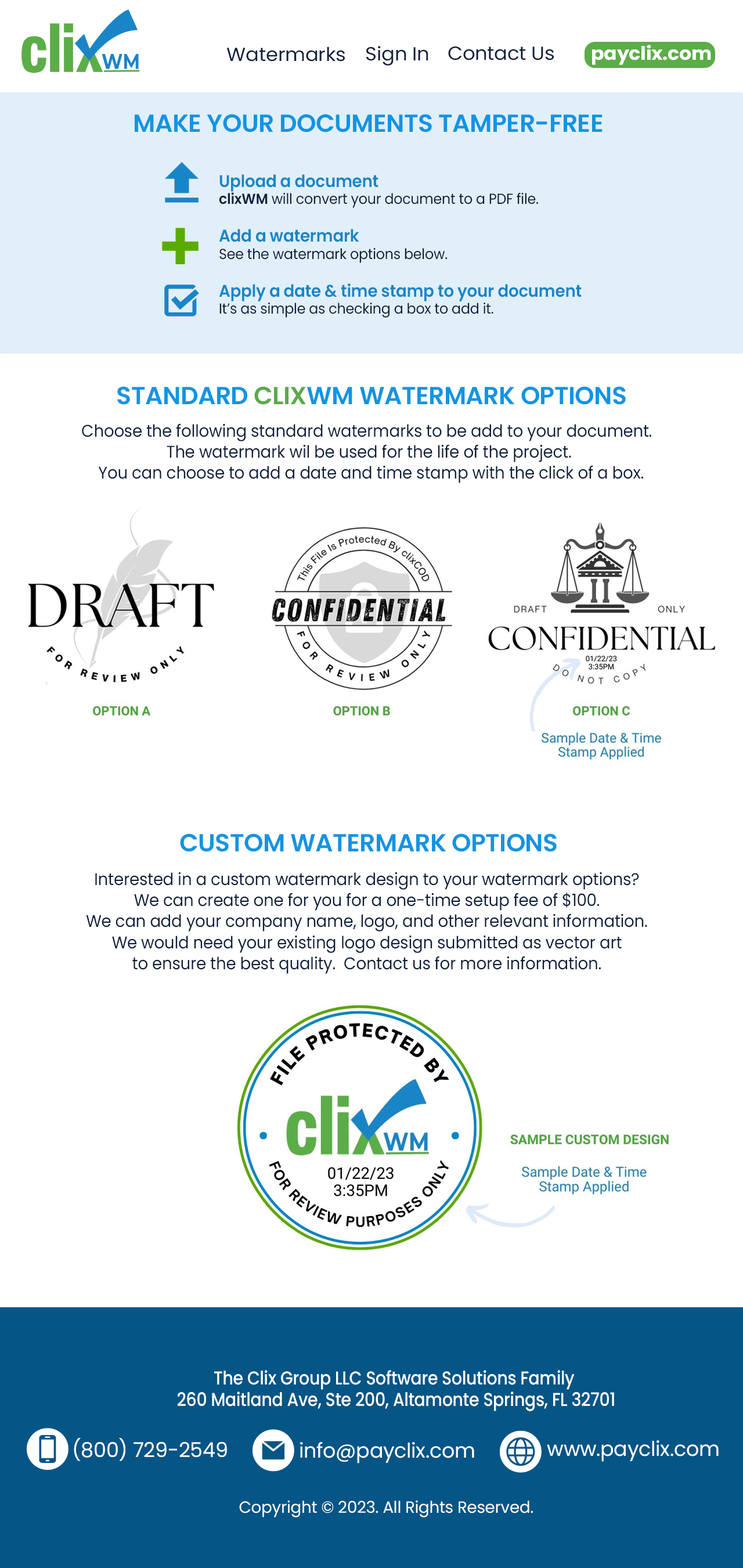
<style>
.page{position:relative;width:743px;height:1568px;background:#ffffff}
.page>*{position:absolute;margin:0}
.t1{font:19px "Poppins-Regular";letter-spacing:-0.01em;color:#10203c;scale:1.04 1}
.t2{font:18.6px "Poppins-Bold";letter-spacing:-0.01em;color:#ffffff;scale:1.04 1}
.t3{font:24.8px "Poppins-SemiBold";letter-spacing:-0.014em;color:#1394e3;text-transform:uppercase}
.t4{font:14.5px/16.9px "Poppins-Regular";letter-spacing:-0.01em;color:#10203c;scale:0.95 1}
.t5{font:16.9px/21.1px "Poppins-SemiBold";letter-spacing:-0.01em;color:#1686c8;scale:0.95 1}
.t6{font:14.5px/16.9px "Poppins-SemiBold";letter-spacing:-0.01em;color:#10203c;scale:0.95 1}
.t7{font:24.8px "Poppins-SemiBold";letter-spacing:-0.014em;color:#5baa4a;text-transform:uppercase}
.t8{font:16.9px/21.1px "Poppins-Regular";letter-spacing:-0.01em;color:#10203c;scale:0.95 1}
.t9{font:18.6px/21.8px "Poppins-Medium";letter-spacing:-0.01em;color:#ffffff;scale:0.89 1}
.t10{font:20.5px "Poppins-Regular";letter-spacing:-0.01em;color:#ffffff}
.t11{font:16.3px "Poppins-Regular";letter-spacing:-0.01em;color:#ffffff}
</style>
<div class="page">
<p class="t1" style="left:226px;top:46px;width:119px;height:16px">Watermarks</p>
<p class="t1" style="left:366px;top:46px;width:63px;height:20px">Sign In</p>
<p class="t1" style="left:448px;top:46px;width:106px;height:14px">Contact Us</p>
<p class="t2" style="left:592px;top:45px;width:119px;height:20px">payclix.com</p>
<p class="t3" style="left:135px;top:114px;width:468px;height:18px">Make Your Documents Tamper-Free</p>
<p class="t4" style="left:219px;top:174px;width:363px;height:144px"><span class="t5">Upload a document<br></span><span class="t6">clixWM</span> will convert your document to a PDF file.<br><br><span class="t5">Add a watermark<br></span>See the watermark options below.<br><br><span class="t5">Apply a date &amp; time stamp to your document<br></span>It’s as simple as checking a box to add it.</p>
<p class="t3" style="left:117px;top:386px;width:509px;height:19px">standard <span class="t7">clix</span>wm Watermark Options</p>
<p class="t8" style="left:82px;top:423px;width:570px;height:60px;text-align:center">Choose the following standard watermarks to be add to your document. <br>The watermark wil be used for the life of the project.<br> You can choose to add a date and time stamp with the click of a box.</p>
<p class="t3" style="left:180px;top:833px;width:377px;height:19px">custom Watermark Options</p>
<p class="t8" style="left:86px;top:872px;width:562px;height:102px;text-align:center">Interested in a custom watermark design to your watermark options? <br>We can create one for you for a one-time setup fee of $100. <br>We can add your company name, logo, and other relevant information. <br>We would need your existing logo design submitted as vector art <br>to ensure the best quality.  Contact us for more information.</p>
<p class="t9" style="left:178px;top:1370px;width:436px;height:41px;text-align:center">The Clix Group LLC Software Solutions Family <br>260 Maitland Ave, Ste 200, Altamonte Springs, FL 32701</p>
<p class="t10" style="left:74px;top:1438px;width:153px;height:23px">(800) 729-2549</p>
<p class="t10" style="left:300px;top:1442px;width:174px;height:21px">info@payclix.com</p>
<p class="t10" style="left:547px;top:1440px;width:172px;height:22px">www.payclix.com</p>
<p class="t11" style="left:239px;top:1500px;width:294px;height:17px">Copyright © 2023. All Rights Reserved.</p>
</div>
